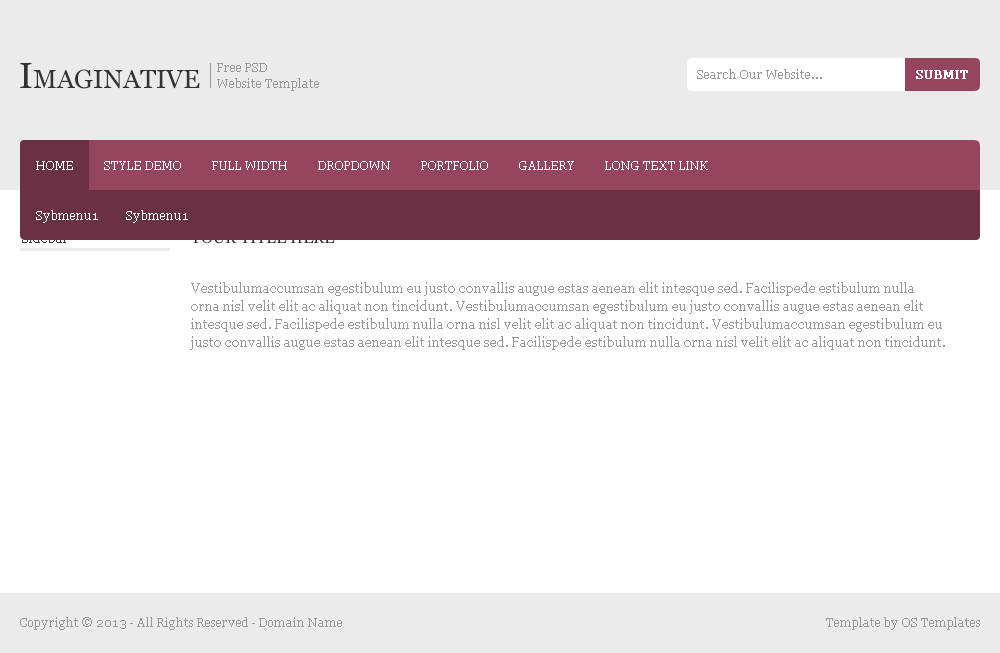
<style>
.page{position:relative;width:1000px;height:653px;background:#ffffff}
.page>*{position:absolute;margin:0}
.t1{font:26px "Georgia";color:#333333}
.t2{font:36px "Georgia";color:#333333}
.t3{font:12px/15.6px "Georgia";color:#999999}
.t4{font:12px "Georgia";color:#999999}
.t5{font:12px "Georgia";color:#ffffff;font-weight:bold}
.t6{font:12px "Georgia";color:#ffffff}
.t7{font:13px "Georgia"}
.t8{font:16px "Georgia"}
.t9{font:13px/18.2px "Georgia";color:#999999}
</style>
<div class="page">
<p class="t1" style="left:20px;top:63px;width:180px;height:26px"><span class="t2">I</span>MAGINATIVE</p>
<p class="t3" style="left:217px;top:63px;width:102px;height:28px">Free PSD<br>Website Template</p>
<p class="t4" style="left:697px;top:69px;width:125px;height:10px">Search Our Website...</p>
<p class="t5" style="left:916px;top:70px;width:52px;height:9px">SUBMIT</p>
<p class="t6" style="left:36px;top:161px;width:37px;height:9px">HOME</p>
<p class="t6" style="left:104px;top:161px;width:77px;height:9px">STYLE DEMO</p>
<p class="t6" style="left:212px;top:161px;width:75px;height:9px">FULL WIDTH</p>
<p class="t6" style="left:318px;top:161px;width:72px;height:9px">DROPDOWN</p>
<p class="t6" style="left:421px;top:161px;width:67px;height:9px">PORTFOLIO</p>
<p class="t6" style="left:519px;top:161px;width:55px;height:9px">GALLERY</p>
<p class="t6" style="left:605px;top:161px;width:103px;height:9px">LONG TEXT LINK</p>
<p class="t6" style="left:36px;top:210px;width:62px;height:13px">Sybmenu1</p>
<p class="t6" style="left:126px;top:210px;width:62px;height:13px">Sybmenu1</p>
<p class="t7" style="left:22px;top:232px;width:46px;height:11px">Sidebar</p>
<p class="t8" style="left:190px;top:231px;width:145px;height:13px">YOUR TITLE HERE</p>
<p class="t9" style="left:190px;top:282px;width:755px;height:68px">Vestibulumaccumsan egestibulum eu justo convallis augue estas aenean elit intesque sed. Facilispede estibulum nulla orna nisl velit elit ac aliquat non tincidunt. Vestibulumaccumsan egestibulum eu justo convallis augue estas aenean elit intesque sed. Facilispede estibulum nulla orna nisl velit elit ac aliquat non tincidunt. Vestibulumaccumsan egestibulum eu justo convallis augue estas aenean elit intesque sed. Facilispede estibulum nulla orna nisl velit elit ac aliquat non tincidunt.</p>
<p class="t4" style="left:20px;top:617px;width:322px;height:13px">Copyright © 2013 - All Rights Reserved - Domain Name</p>
<p class="t4" style="left:826px;top:617px;width:154px;height:13px">Template by OS Templates</p>
</div>
